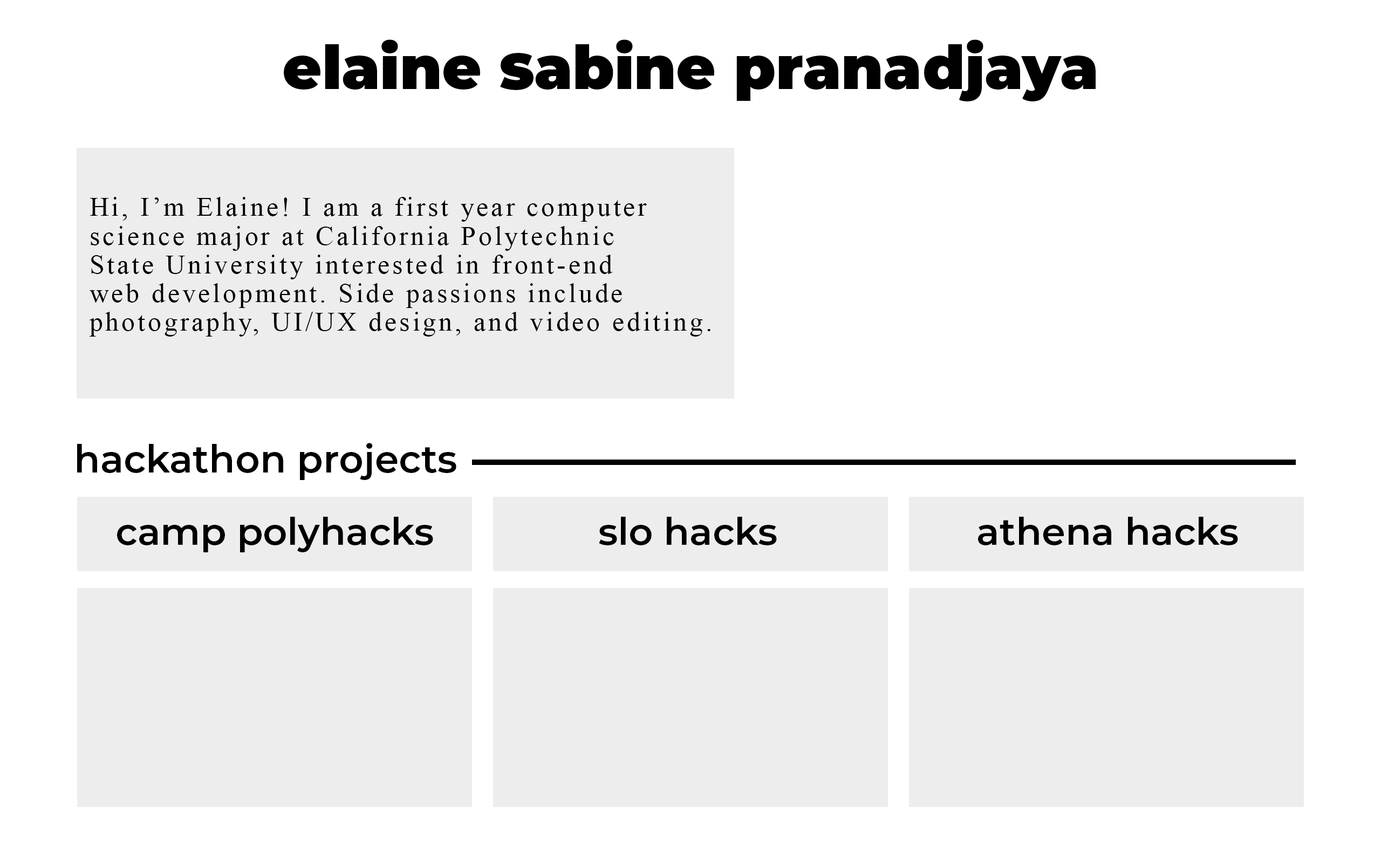
<style>
.page{position:relative;width:1381px;height:863px;background:#ffffff}
.page>*{position:absolute;margin:0}
.t1{font:60px "Montserrat-Black";color:#000000}
.t2{font:26.8px/28.7px "TimesNewRomanPSMT";letter-spacing:0.1em;color:#000000}
.t3{font:38.3px "Montserrat-SemiBold";color:#000000}
.t4{font:37.9px "Montserrat-SemiBold";color:#000000}
</style>
<div class="page">
<p class="t1" style="left:284px;top:39px;width:812px;height:62px">elaine Sabine pranadjaya</p>
<p class="t2" style="left:89px;top:197px;width:622px;height:140px;text-align:right">Hi, I’m Elaine! I am a first year computer<br>science major at California Polytechnic<br>State University interested in front-end <br>web development. Side passions include<br>photography, UI/UX design, and video editing.</p>
<p class="t3" style="left:77px;top:443px;width:379px;height:37px">hackathon projects</p>
<p class="t4" style="left:117px;top:517px;width:316px;height:36px">camp polyhacks</p>
<p class="t4" style="left:599px;top:517px;width:178px;height:28px">slo hacks</p>
<p class="t4" style="left:978px;top:517px;width:260px;height:28px">athena hacks</p>
</div>
